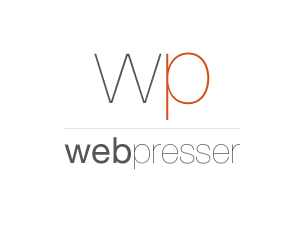
<style>
.page{position:relative;width:300px;height:225px;background:#ffffff}
.page>*{position:absolute;margin:0}
.t1{font:96px "HelveticaNeue-UltraLight";color:#555555}
.t2{font:96px "HelveticaNeue-UltraLight";color:#d14d14}
.t3{font:36px "HelveticaNeue-UltraLight";color:#555555}
.t4{font:36px "HelveticaNeue";color:#555555}
</style>
<div class="page">
<p class="t1" style="left:94px;top:52px;width:116px;height:68px">w<span class="t2">p</span></p>
<p class="t3" style="left:64px;top:137px;width:176px;height:33px"><span class="t4">web</span>presser</p>
</div>
